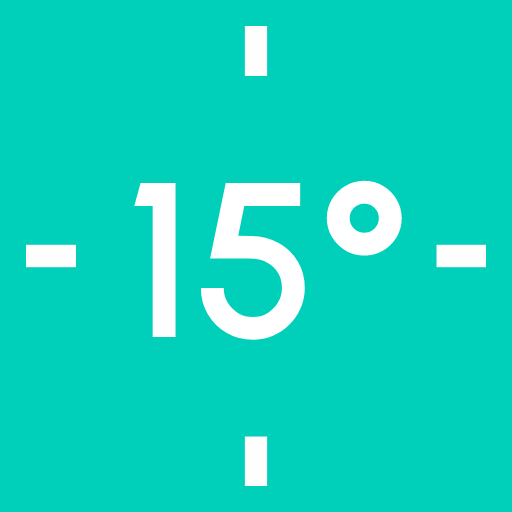
<style>
.page{position:relative;width:512px;height:512px;background:#00d0b9}
.page>*{position:absolute;margin:0}
.t1{font:220px "Urbanist-SemiBold";color:#ffffff}
</style>
<div class="page">
<p class="t1" style="left:134px;top:180px;width:268px;height:160px">15°</p>
</div>
